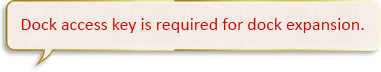
<style>
.page{position:relative;width:381px;height:72px}
.page>*{position:absolute;margin:0}
.t1{font:18px "Calibri";color:#d00000}
</style>
<div class="page">
<p class="t1" style="left:21px;top:18px;width:343px;height:15px">Dock access key is required for dock expansion.</p>
</div>
